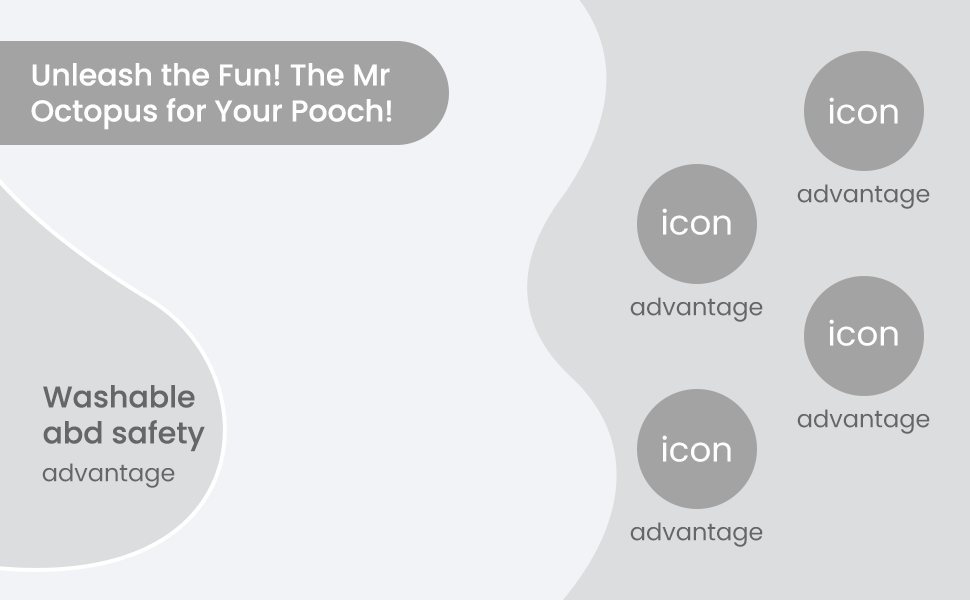
<style>
.page{position:relative;width:970px;height:600px;background:#f2f3f6}
.page>*{position:absolute;margin:0}
.t1{font:30px "Poppins-Medium";color:#ffffff}
.t2{font:34px "Poppins-Regular";color:#ffffff}
.t3{font:24px "Poppins-Regular";color:#666666}
.t4{font:30px "Poppins-Medium";color:#666666}
</style>
<div class="page">
<p class="t1" style="left:31px;top:63px;width:361px;height:67px">Unleash the Fun! The Mr<br>Octopus for Your Pooch!</p>
<p class="t2" style="left:829px;top:97px;width:69px;height:27px">icon</p>
<p class="t3" style="left:797px;top:184px;width:133px;height:25px">advantage</p>
<p class="t2" style="left:662px;top:208px;width:69px;height:27px">icon</p>
<p class="t3" style="left:630px;top:297px;width:133px;height:25px">advantage</p>
<p class="t2" style="left:829px;top:319px;width:69px;height:27px">icon</p>
<p class="t4" style="left:43px;top:385px;width:162px;height:67px">Washable<br>abd safety</p>
<p class="t3" style="left:797px;top:409px;width:133px;height:25px">advantage</p>
<p class="t2" style="left:662px;top:435px;width:69px;height:27px">icon</p>
<p class="t3" style="left:42px;top:463px;width:133px;height:25px">advantage</p>
<p class="t3" style="left:630px;top:522px;width:133px;height:25px">advantage</p>
</div>
